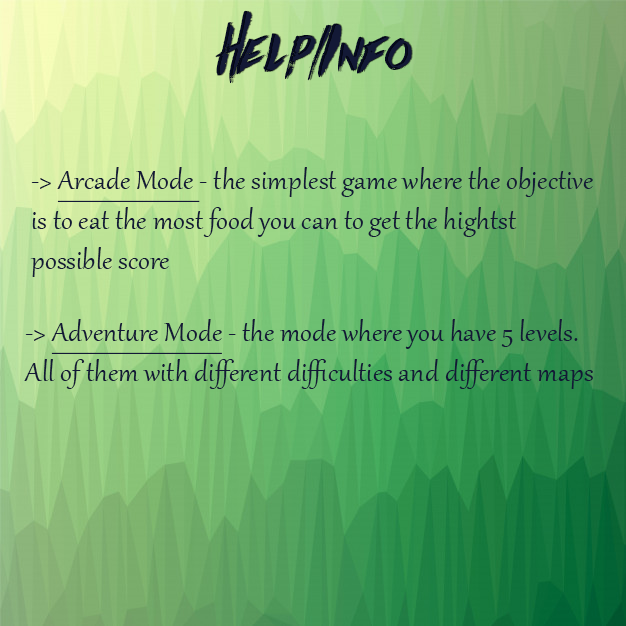
<style>
.page{position:relative;width:626px;height:626px}
.page>*{position:absolute;margin:0}
.t1{font:66.7px "Againts";color:#060b23}
.t2{font:66.7px "Againts";color:#131936}
.t3{font:33.3px "Gabriola";color:#131936}
.t4{font:33.3px "Gabriola";color:#131936;text-decoration:underline}
</style>
<div class="page">
<p class="t1" style="left:215px;top:10px;width:196px;height:74px">Help/Info</p>
<p class="t2" style="left:217px;top:10px;width:196px;height:74px">Help/Info</p>
<p class="t3" style="left:30px;top:167px;width:563px;height:110px">-&gt; <span class="t4">Arcade Mode </span>- the simplest game where the objective<br>is to eat the most food you can to get the hightst<br>possible score</p>
<p class="t3" style="left:24px;top:319px;width:569px;height:70px">-&gt; <span class="t4">Adventure Mode</span> - the mode where you have 5 levels.<br>All of them with different difficulties and different maps</p>
</div>
